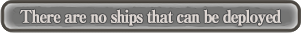
<style>
.page{position:relative;width:301px;height:33px}
.page>*{position:absolute;margin:0}
.t1{font:17px "RyuminPro-ExBold";letter-spacing:-0.08em;color:#ddd6d2;font-weight:bold;scale:0.9 1}
</style>
<div class="page">
<p class="t1" style="left:20px;top:9px;width:261px;height:17px">There are no ships that can be deployed</p>
</div>
